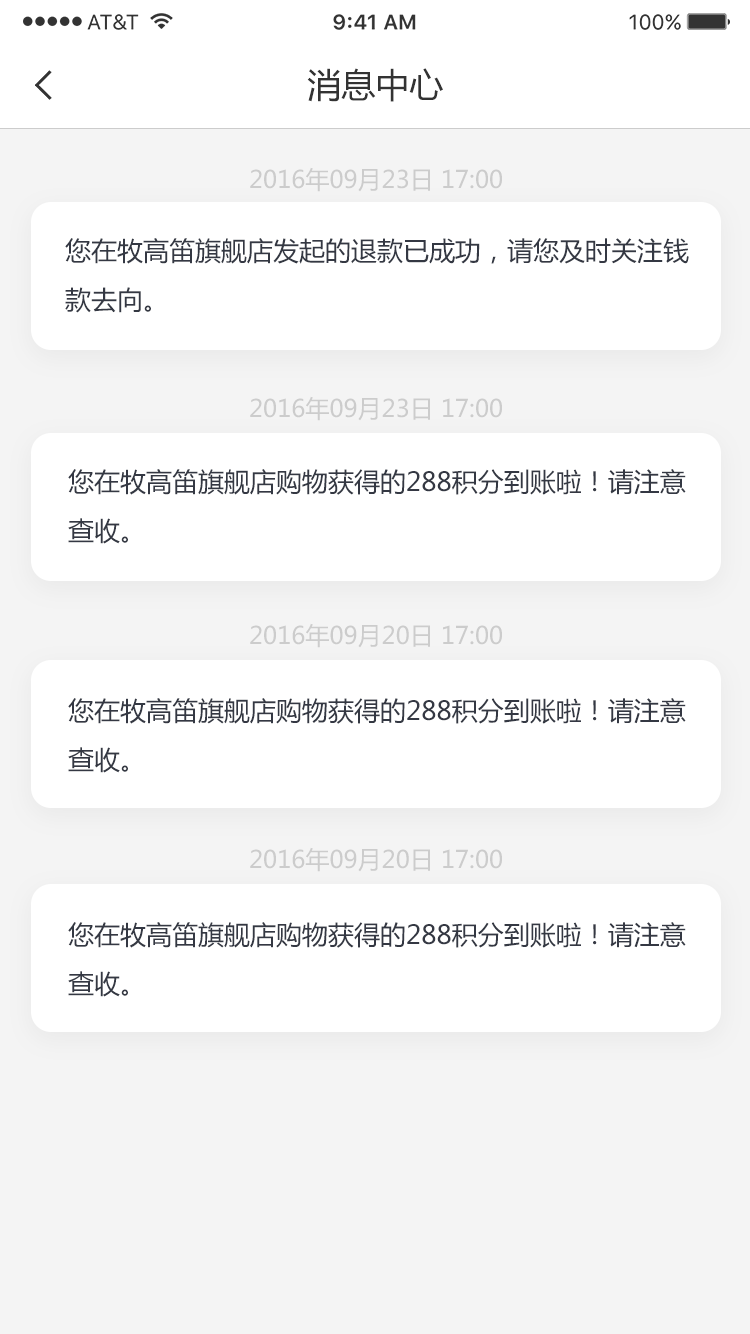
<style>
.page{position:relative;width:750px;height:1334px;background:#ffffff}
.page>*{position:absolute;margin:0}
.t1{font:34px "MicrosoftYaHei";color:#333333}
.t2{font:24px "MicrosoftYaHei";color:#cccccc}
.t3{font:26px/49px "MicrosoftYaHei";color:#343843}
</style>
<div class="page">
<p class="t1" style="left:307px;top:68px;width:136px;height:34px">消息中心</p>
<p class="t2" style="left:250px;top:167px;width:252px;height:25px">2016年09月23日 17:00</p>
<p class="t3" style="left:65px;top:238px;width:624px;height:75px">您在牧高笛旗舰店发起的退款已成功，请您及时关注钱<br>款去向。</p>
<p class="t2" style="left:250px;top:396px;width:252px;height:25px">2016年09月23日 17:00</p>
<p class="t3" style="left:68px;top:469px;width:618px;height:75px">您在牧高笛旗舰店购物获得的288积分到账啦！请注意<br>查收。</p>
<p class="t2" style="left:250px;top:623px;width:252px;height:25px">2016年09月20日 17:00</p>
<p class="t3" style="left:68px;top:698px;width:618px;height:75px">您在牧高笛旗舰店购物获得的288积分到账啦！请注意<br>查收。</p>
<p class="t2" style="left:250px;top:847px;width:252px;height:25px">2016年09月20日 17:00</p>
<p class="t3" style="left:68px;top:922px;width:618px;height:75px">您在牧高笛旗舰店购物获得的288积分到账啦！请注意<br>查收。</p>
</div>
